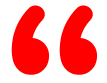
<style>
.page{position:relative;width:107px;height:83px;background:#ffffff}
.page>*{position:absolute;margin:0}
.t1{font:250px "Nunito-Bold";letter-spacing:0.1em;color:#ff0000}
</style>
<div class="page">
<p class="t1" style="left:11px;top:5px;width:86px;height:70px">“</p>
</div>
